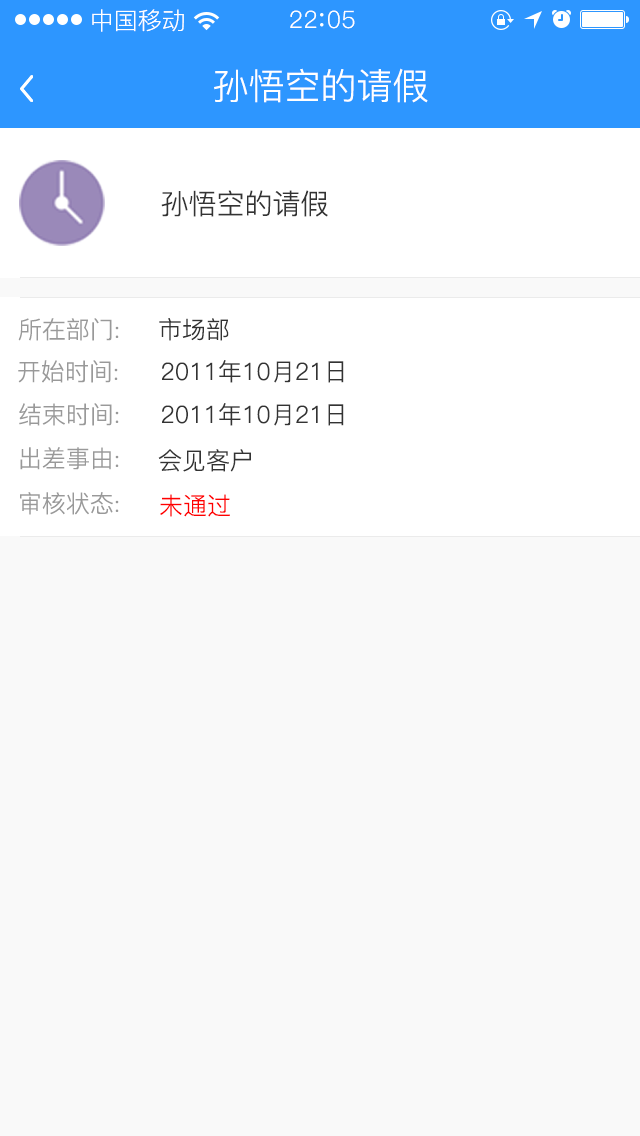
<style>
.page{position:relative;width:640px;height:1136px;background:#f9f9f9}
.page>*{position:absolute;margin:0}
.t1{font:24px "PingFang-SC-Regular";color:#ffffff}
.t2{font:24px "PingFang-SC-Regular";letter-spacing:0.03em;color:#ffffff}
.t3{font:36px "PingFang-SC-Regular";color:#ffffff}
.t4{font:28px "PingFang-SC-Regular";color:#333333}
.t5{font:24px "PingFang-SC-Regular";color:#999999}
.t6{font:24px "PingFang-SC-Regular";color:#333333}
.t7{font:24px "PingFang-SC-Regular";color:#ff0000}
</style>
<div class="page">
<p class="t1" style="left:92px;top:9px;width:92px;height:23px">中国移动</p>
<p class="t2" style="left:290px;top:10px;width:65px;height:19px">22 05</p>
<p class="t3" style="left:214px;top:68px;width:214px;height:35px">孙悟空的请假</p>
<p class="t4" style="left:161px;top:190px;width:167px;height:27px">孙悟空的请假</p>
<p class="t5" style="left:18px;top:318px;width:101px;height:23px">所在部门:</p>
<p class="t6" style="left:159px;top:318px;width:70px;height:23px">市场部</p>
<p class="t5" style="left:18px;top:360px;width:100px;height:23px">开始时间:</p>
<p class="t6" style="left:162px;top:360px;width:182px;height:23px">2011年10月21日</p>
<p class="t5" style="left:19px;top:403px;width:100px;height:23px">结束时间:</p>
<p class="t6" style="left:162px;top:403px;width:182px;height:23px">2011年10月21日</p>
<p class="t5" style="left:20px;top:447px;width:99px;height:23px">出差事由:</p>
<p class="t6" style="left:158px;top:449px;width:93px;height:23px">会见客户</p>
<p class="t5" style="left:20px;top:492px;width:99px;height:23px">审核状态:</p>
<p class="t7" style="left:160px;top:494px;width:70px;height:23px">未通过</p>
</div>
